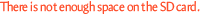
<style>
.page{position:relative;width:200px;height:14px;background:#ffffff}
.page>*{position:absolute;margin:0}
.t1{font:13.2px "Amira-Roman";letter-spacing:-0.024em;color:#fe4d2a;scale:0.91 1}
</style>
<div class="page">
<p class="t1" style="left:0px;top:1px;width:200px;height:13px">There is not enough space on the SD card.</p>
</div>
